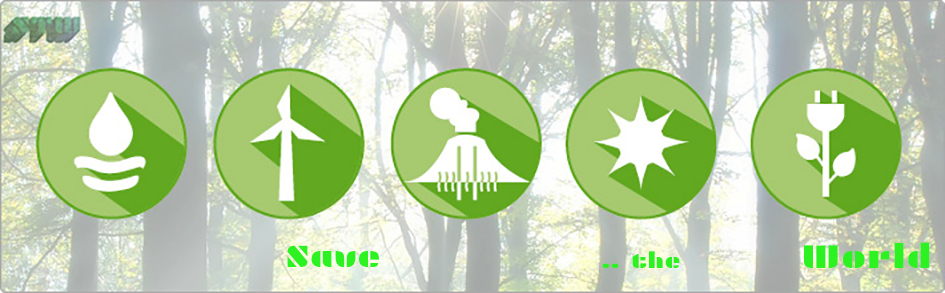
<style>
.page{position:relative;width:945px;height:293px}
.page>*{position:absolute;margin:0}
.t1{font:31.9px "Plaster-Regular";color:#2cf222}
.t2{font:33.9px "Plaster-Regular";color:#2cf222}
.t3{font:22.3px "Plaster-Regular";color:#2cf222}
</style>
<div class="page">
<p class="t1" style="left:287px;top:245px;width:92px;height:22px">Save</p>
<p class="t2" style="left:804px;top:242px;width:126px;height:26px">World</p>
<p class="t3" style="left:602px;top:251px;width:78px;height:17px">.. the</p>
</div>
